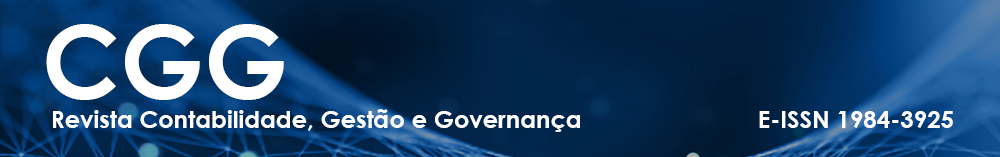
<style>
.page{position:relative;width:1000px;height:157px}
.page>*{position:absolute;margin:0}
.t1{font:100px "CenturyGothic-Bold";color:#ffffff}
.t2{font:24px "CenturyGothic-Bold";color:#ffffff}
</style>
<div class="page">
<p class="t1" style="left:46px;top:24px;width:238px;height:76px">CGG</p>
<p class="t2" style="left:53px;top:109px;width:527px;height:23px">Revista Contabilidade, Gestão e Governança</p>
<p class="t2" style="left:759px;top:111px;width:194px;height:17px">E-ISSN 1984-3925</p>
</div>
